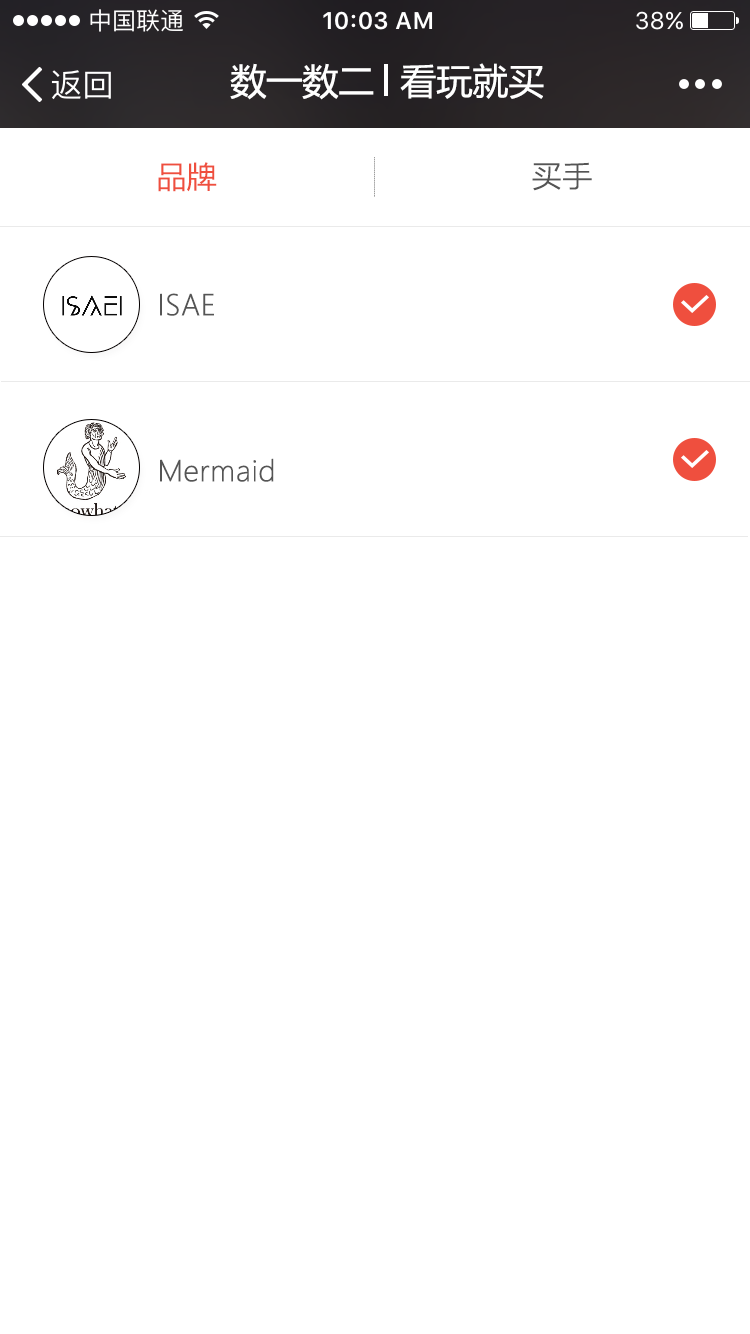
<style>
.page{position:relative;width:750px;height:1334px;background:#ffffff}
.page>*{position:absolute;margin:0}
.t1{font:36px "MicrosoftYaHei";color:#ffffff}
.t2{font:30px "MicrosoftYaHei";color:#ef4f3e}
.t3{font:30px "MicrosoftYaHeiLight";color:#555555;font-weight:bold}
.t4{font:28px "MicrosoftYaHeiLight";color:#555555;font-weight:bold}
</style>
<div class="page">
<p class="t1" style="left:230px;top:63px;width:144px;height:37px">数一数二</p>
<p class="t1" style="left:400px;top:63px;width:144px;height:36px">看玩就买</p>
<p class="t2" style="left:158px;top:162px;width:59px;height:30px">品牌</p>
<p class="t3" style="left:532px;top:162px;width:60px;height:29px">买手</p>
<p class="t4" style="left:160px;top:293px;width:54px;height:23px">ISAE</p>
<p class="t4" style="left:160px;top:458px;width:114px;height:24px">Mermaid</p>
</div>
